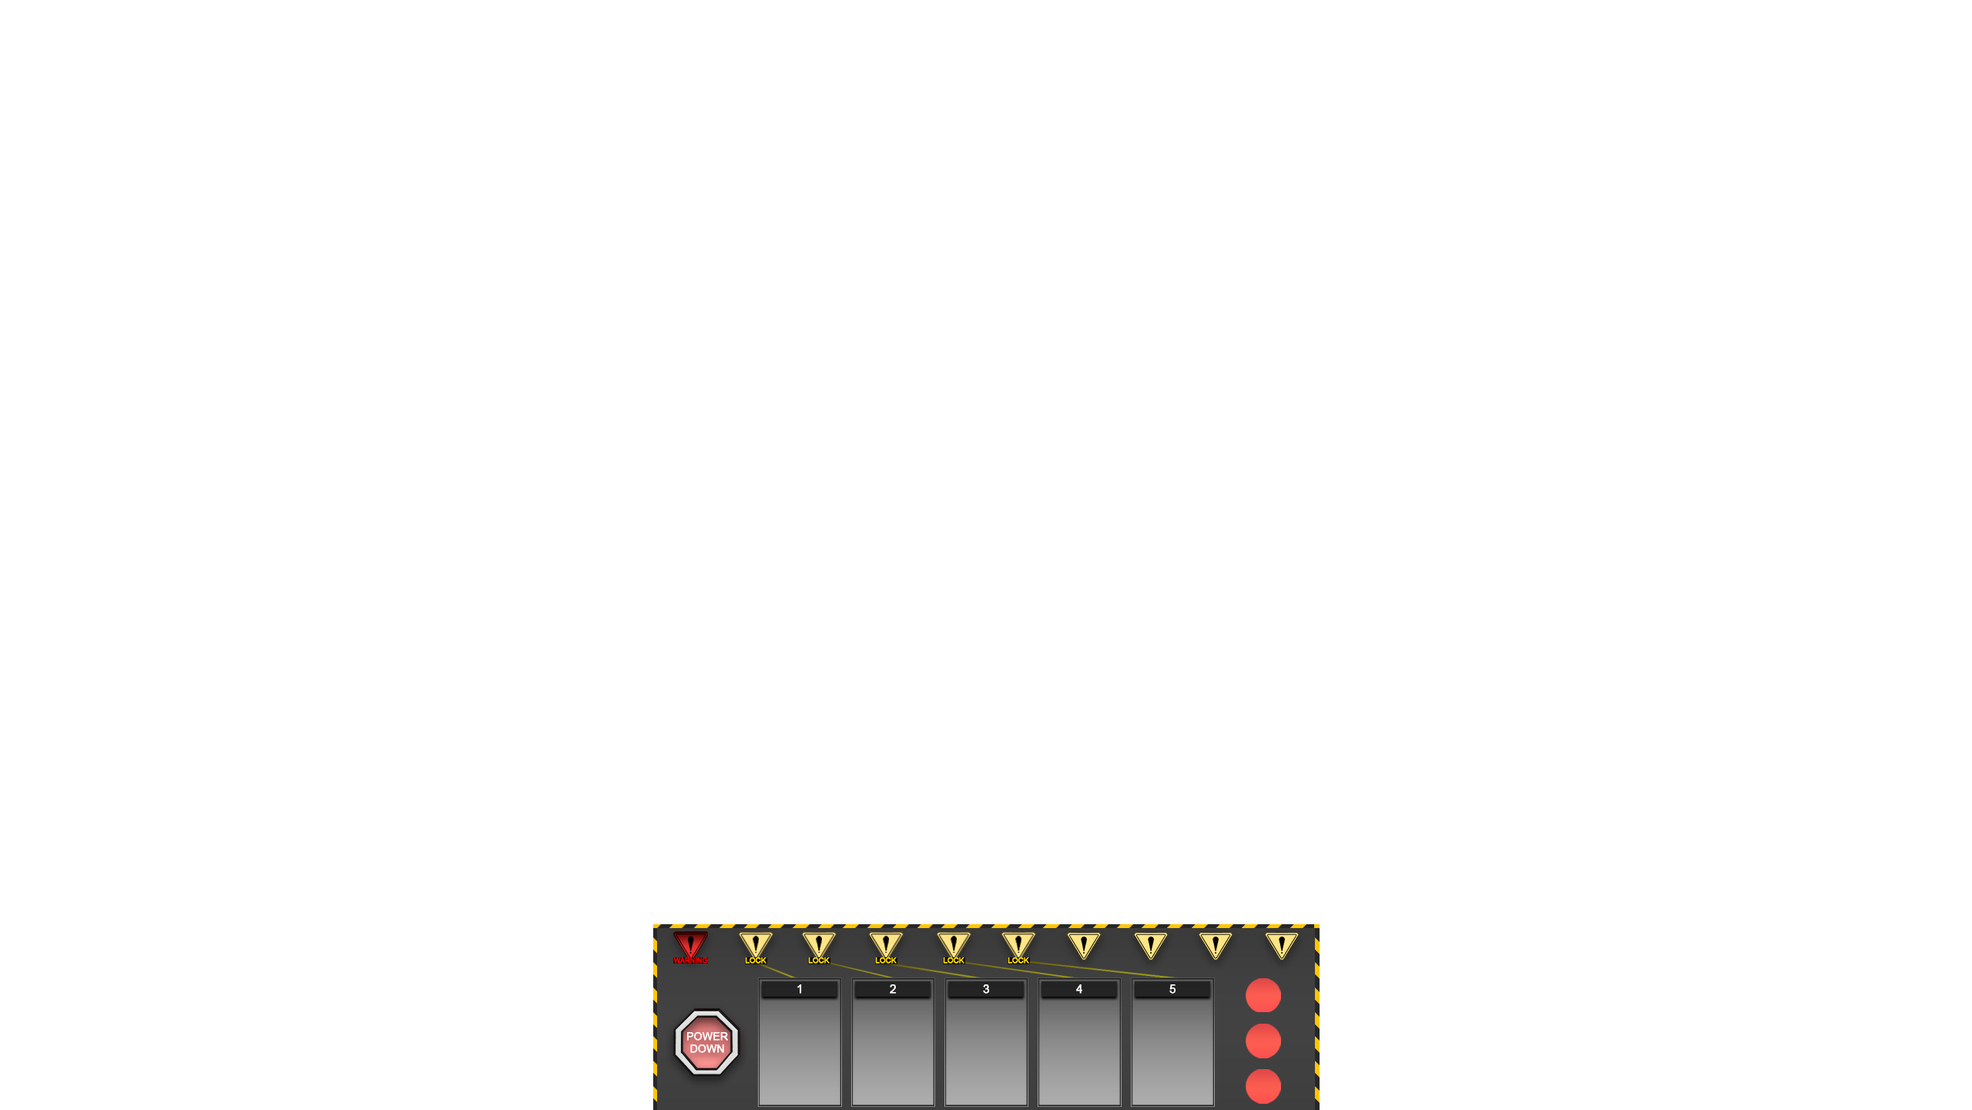
<style>
.page{position:relative;width:1972px;height:1110px;background:#ffffff}
.page>*{position:absolute;margin:0}
.t1{font:6.8px "ArialMT";color:#e60000;font-weight:bold}
.t2{font:7.3px "ArialMT";color:#ffde00;font-weight:bold}
.t3{font:11.2px "ArialMT";color:#ffffff;font-weight:bold}
.t4{font:10.7px "ArialMT";color:#ffffff;font-weight:bold}
</style>
<div class="page">
<p class="t1" style="left:673px;top:957px;width:35px;height:6px">WARNING</p>
<p class="t2" style="left:745px;top:957px;width:22px;height:6px">LOCK</p>
<p class="t2" style="left:808px;top:957px;width:22px;height:6px">LOCK</p>
<p class="t2" style="left:875px;top:957px;width:22px;height:6px">LOCK</p>
<p class="t2" style="left:943px;top:957px;width:22px;height:6px">LOCK</p>
<p class="t2" style="left:1008px;top:957px;width:21px;height:6px">LOCK</p>
<p class="t3" style="left:797px;top:984px;width:5px;height:9px">1</p>
<p class="t3" style="left:890px;top:984px;width:7px;height:9px">2</p>
<p class="t3" style="left:983px;top:984px;width:7px;height:9px">3</p>
<p class="t3" style="left:1076px;top:984px;width:7px;height:9px">4</p>
<p class="t3" style="left:1170px;top:984px;width:7px;height:9px">5</p>
<p class="t4" style="left:687px;top:1032px;width:41px;height:20px;text-align:center">POWER<br>DOWN</p>
</div>
